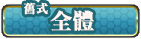
<style>
.page{position:relative;width:141px;height:39px}
.page>*{position:absolute;margin:0}
.t1{font:12px "RyuminPr6N-ExBold";color:#fff5f1;font-weight:bold}
.t2{font:22px "RyuminPr6N-ExBold";color:#fff5f1;font-weight:bold}
</style>
<div class="page">
<p class="t1" style="left:24px;top:2px;width:24px;height:13px">舊式</p>
<p class="t2" style="left:50px;top:10px;width:44px;height:21px">全體</p>
</div>
